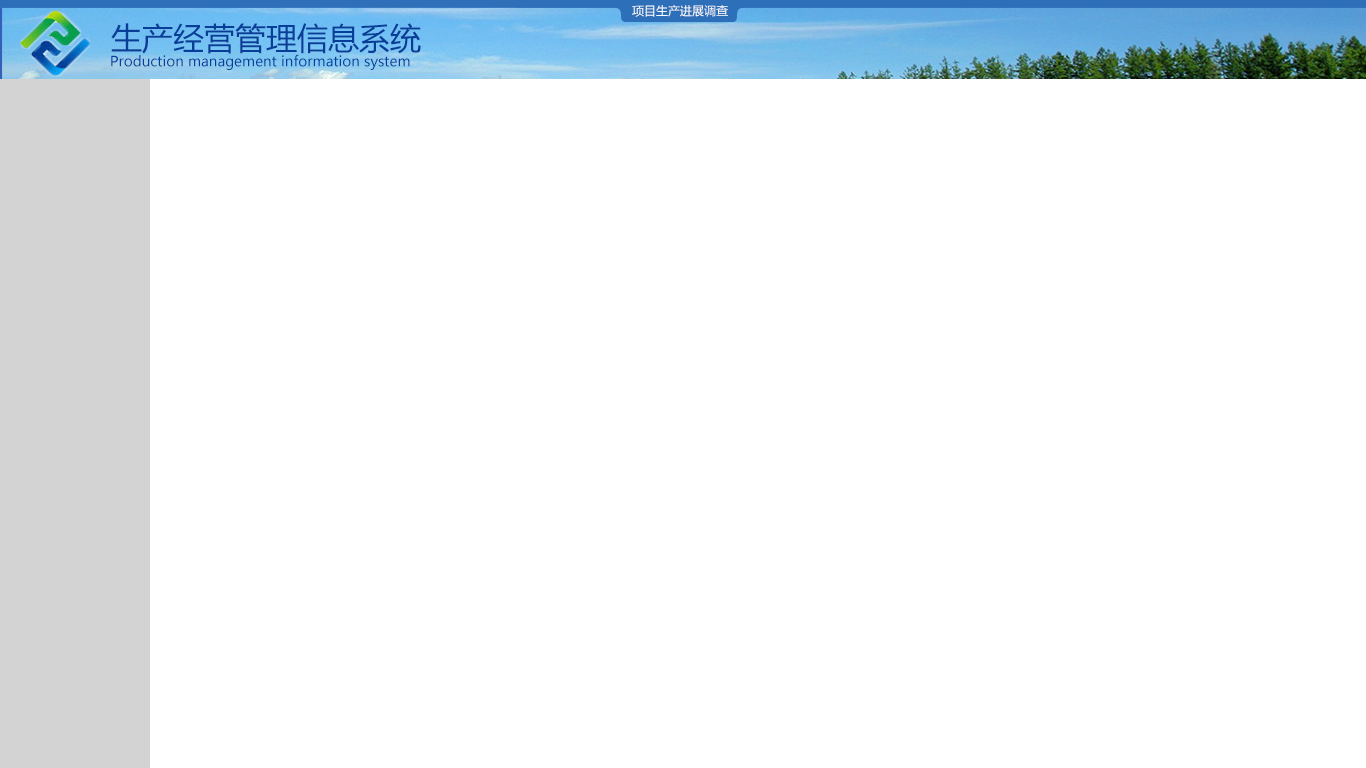
<style>
.page{position:relative;width:1366px;height:768px;background:#ffffff}
.page>*{position:absolute;margin:0}
.t1{font:12px "MicrosoftYaHei";color:#fdfdfd}
.t2{font:31px "MicrosoftYaHei";color:#083e97}
.t3{font:14px "MicrosoftYaHei";color:#03409d}
</style>
<div class="page">
<p class="t1" style="left:632px;top:5px;width:96px;height:12px">项目生产进展调查</p>
<p class="t2" style="left:111px;top:23px;width:310px;height:31px">生产经营管理信息系统</p>
<p class="t3" style="left:111px;top:54px;width:299px;height:16px">Production management information system</p>
</div>
